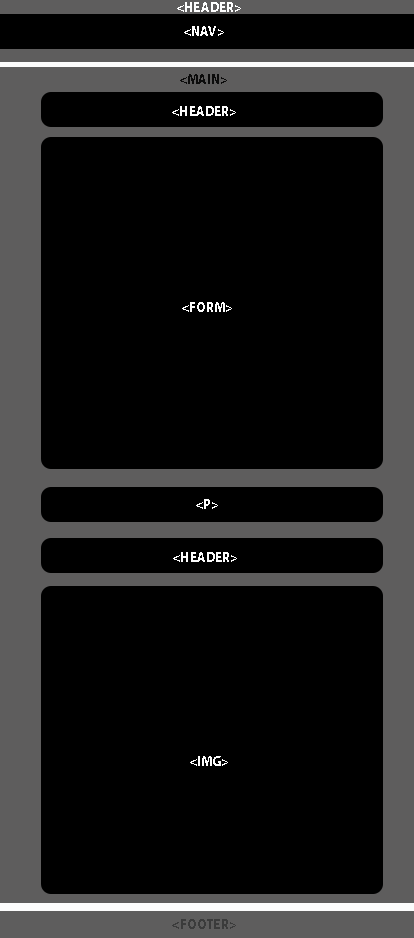
<style>
.page{position:relative;width:414px;height:938px;background:#000000}
.page>*{position:absolute;margin:0}
.t1{font:13.5px "MyriadPro-Bold";color:#ffffff}
.t2{font:13.5px "MyriadPro-Bold";color:#0c0c0c}
.t3{font:13.5px "MyriadPro-Bold";color:#fcfcfc}
.t4{font:13.5px "MyriadPro-Bold";color:#fdfdfd}
</style>
<div class="page">
<p class="t1" style="left:177px;top:2px;width:64px;height:10px">&lt;HEADER&gt;</p>
<p class="t1" style="left:184px;top:26px;width:40px;height:10px">&lt;NAV&gt;</p>
<p class="t2" style="left:180px;top:74px;width:47px;height:10px">&lt;MAIN&gt;</p>
<p class="t3" style="left:172px;top:106px;width:64px;height:10px">&lt;HEADER&gt;</p>
<p class="t4" style="left:182px;top:302px;width:50px;height:10px">&lt;FORM&gt;</p>
<p class="t3" style="left:196px;top:499px;width:22px;height:10px">&lt;P&gt;</p>
<p class="t3" style="left:173px;top:552px;width:64px;height:10px">&lt;HEADER&gt;</p>
<p class="t4" style="left:190px;top:756px;width:38px;height:10px">&lt;IMG&gt;</p>
</div>
